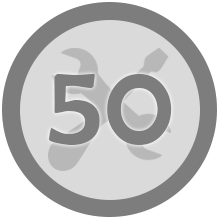
<style>
.page{position:relative;width:220px;height:220px;background:#dadada}
.page>*{position:absolute;margin:0}
.t1{font:118px "BerlinSansFB-Reg";color:#7d7d7d}
</style>
<div class="page">
<p class="t1" style="left:49px;top:74px;width:123px;height:71px">50</p>
</div>
